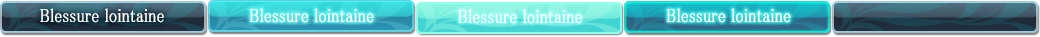
<style>
.page{position:relative;width:1040px;height:37px}
.page>*{position:absolute;margin:0}
.t1{font:19px "MS-PMincho";color:#ffffff;font-weight:bold;scale:0.84 1}
</style>
<div class="page">
<p class="t1" style="left:40px;top:8px;width:124px;height:15px">Blessure lointaine</p>
<p class="t1" style="left:249px;top:8px;width:125px;height:15px">Blessure lointaine</p>
<p class="t1" style="left:458px;top:9px;width:124px;height:15px">Blessure lointaine</p>
<p class="t1" style="left:666px;top:8px;width:125px;height:15px">Blessure lointaine</p>
</div>
